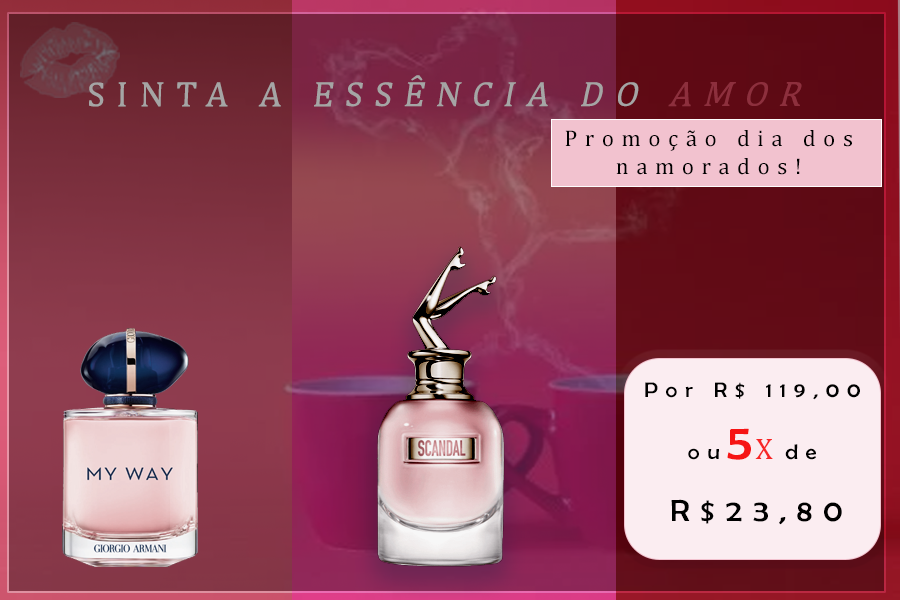
<style>
.page{position:relative;width:900px;height:600px}
.page>*{position:absolute;margin:0}
.t1{font:36px "Cambria";letter-spacing:0.33em;color:#a5a5a5}
.t2{font:23px "Cambria";letter-spacing:0.33em;color:#000000}
.t3{font:21.4px "BerlinSansFB-Reg";letter-spacing:0.33em;color:#000000;scale:1.08 1}
.t4{font:51.2px "BerlinSansFB-Reg";letter-spacing:0.33em;color:#f61414;scale:1.08 1}
.t5{font:30.7px "BerlinSansFB-Reg";letter-spacing:0.33em;color:#000000;scale:1.08 1}
.t6{font:30px "Cambria";letter-spacing:0.33em;color:#f72727}
</style>
<div class="page">
<p class="t1" style="left:89px;top:75px;width:713px;height:32px">SINTA A ESSÊNCIA DO AMOR</p>
<p class="t2" style="left:565px;top:130px;width:287px;height:45px;text-align:center">Promoção dia dos namorados!</p>
<p class="t3" style="left:645px;top:382px;width:215px;height:143px;text-align:center">Por R$ 119,00<br>ou<span class="t4">5</span> de<br><br><span class="t5">    R$23,80</span></p>
<p class="t6" style="left:755px;top:439px;width:18px;height:20px">X</p>
</div>
